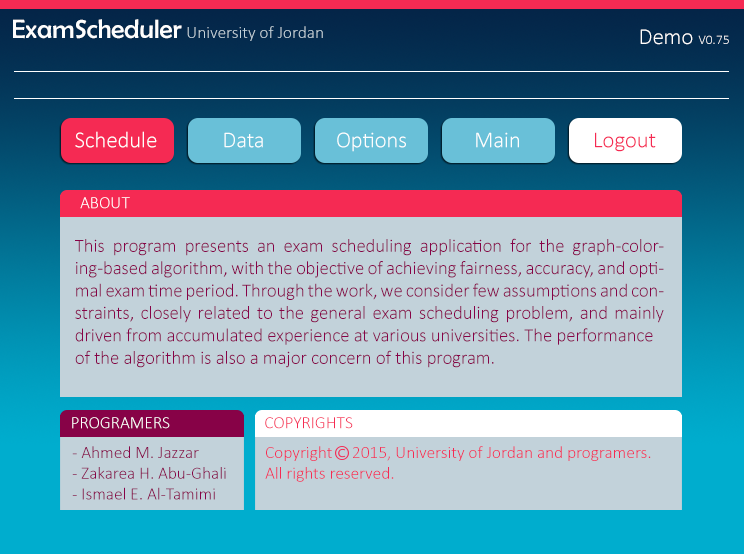
<style>
.page{position:relative;width:744px;height:554px;background:#c2d2da}
.page>*{position:absolute;margin:0}
.t1{font:26.7px "BerlinSansFB-Reg";color:#fefefe}
.t2{font:17.3px "Calibri-Light";color:#c2d2da}
.t3{font:13.3px "Calibri-Light";color:#fefefe}
.t4{font:22.7px "Calibri-Light";color:#fefefe}
.t5{font:22.7px "Calibri-Light";color:#f52a53}
.t6{font:17.3px "Calibri-Light";color:#ffffff}
.t7{font:18.7px "Calibri-Light";color:#870247}
.t8{font:17.3px "Calibri-Light";color:#f52a53}
.t9{font:17.3px "Calibri-Light";color:#870247}
</style>
<div class="page">
<p class="t1" style="left:13px;top:19px;width:169px;height:20px">ExamScheduler</p>
<p class="t2" style="left:187px;top:26px;width:136px;height:15px">University of Jordan</p>
<p class="t3" style="left:640px;top:29px;width:89px;height:16px"><span class="t4">Demo </span>V0.75</p>
<p class="t4" style="left:75px;top:131px;width:82px;height:17px">Schedule</p>
<p class="t4" style="left:224px;top:132px;width:39px;height:16px">Data</p>
<p class="t4" style="left:337px;top:132px;width:69px;height:20px">Options</p>
<p class="t4" style="left:476px;top:132px;width:43px;height:16px">Main</p>
<p class="t5" style="left:595px;top:132px;width:61px;height:20px">Logout</p>
<p class="t6" style="left:80px;top:197px;width:50px;height:12px">ABOUT</p>
<p class="t7" style="left:75px;top:238px;width:589px;height:130px;text-align:justify">This program presents an exam scheduling application for the graph-coloring-based algorithm, with the objective of achieving fairness, accuracy, and optimal exam time period. Through the work, we consider few assumptions and constraints, closely related to the general exam scheduling problem, and mainly driven from accumulated experience at various universities. The performance<br>of the algorithm is also a major concern of this program.</p>
<p class="t6" style="left:72px;top:417px;width:98px;height:12px">PROGRAMERS</p>
<p class="t8" style="left:265px;top:417px;width:88px;height:12px">COPYRIGHTS</p>
<p class="t9" style="left:72px;top:446px;width:154px;height:54px">- Ahmed M. Jazzar<br>- Zakarea H. Abu-Ghali<br>- Ismael E. Al-Tamimi</p>
<p class="t8" style="left:265px;top:446px;width:386px;height:36px">Copyright     2015, University of Jordan and programers.<br>All rights reserved.</p>
</div>
